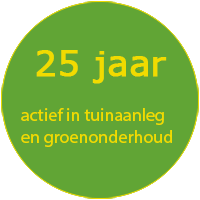
<style>
.page{position:relative;width:200px;height:200px;background:#61a535}
.page>*{position:absolute;margin:0}
.t1{font:18px "MyriadPro-Regular";color:#f1db00}
</style>
<div class="page">
<p class="t1" style="left:21px;top:108px;width:151px;height:39px">actief in tuinaanleg<br>en groenonderhoud</p>
</div>
